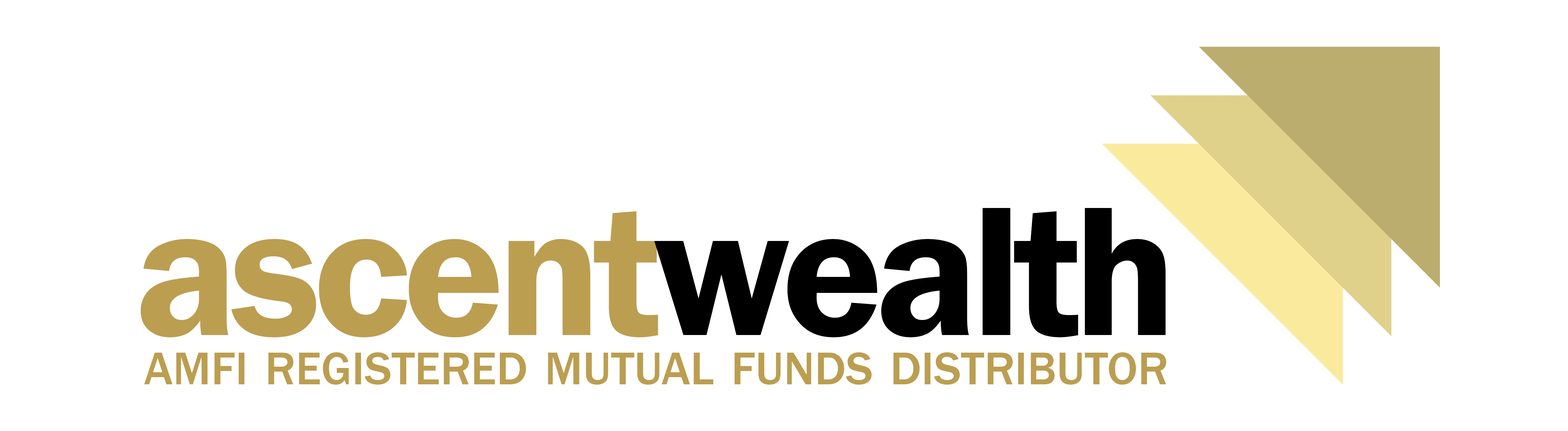
<style>
.page{position:relative;width:1568px;height:431px;background:#ffffff}
.page>*{position:absolute;margin:0}
.t1{font:190.6px "FranklinGothic-Demi";letter-spacing:-0.04em;color:#bb9e50}
.t2{font:190.6px "FranklinGothic-Demi";letter-spacing:-0.04em;color:#000000}
.t3{font:68.1px "FranklinGothic-Medium";color:#bb9e50;font-variant:small-caps}
</style>
<div class="page">
<p class="t1" style="left:140px;top:208px;width:1026px;height:129px">ascent<span class="t2">wealth</span></p>
<p class="t3" style="left:144px;top:352px;width:1023px;height:33px">amfi registered mutual funds distributor</p>
</div>
